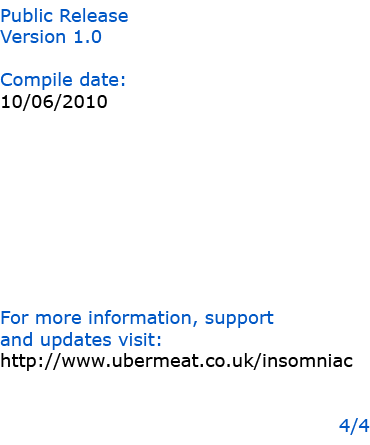
<style>
.page{position:relative;width:370px;height:445px;background:#ffffff}
.page>*{position:absolute;margin:0}
.t1{font:18px "Verdana";color:#0057c5}
.t2{font:18px "Verdana";color:#000000}
</style>
<div class="page">
<p class="t1" style="left:0px;top:8px;width:370px;height:427px">Public Release<br>Version 1.0<br><br>Compile date:<br><span class="t2">10/06/2010<br></span><br><br><br><br><br><br><br><br><br>For more information, support<br>and updates visit:<span class="t2"><br>http://www.ubermeat.co.uk/insomniac<br><br><br></span>4/4</p>
</div>
